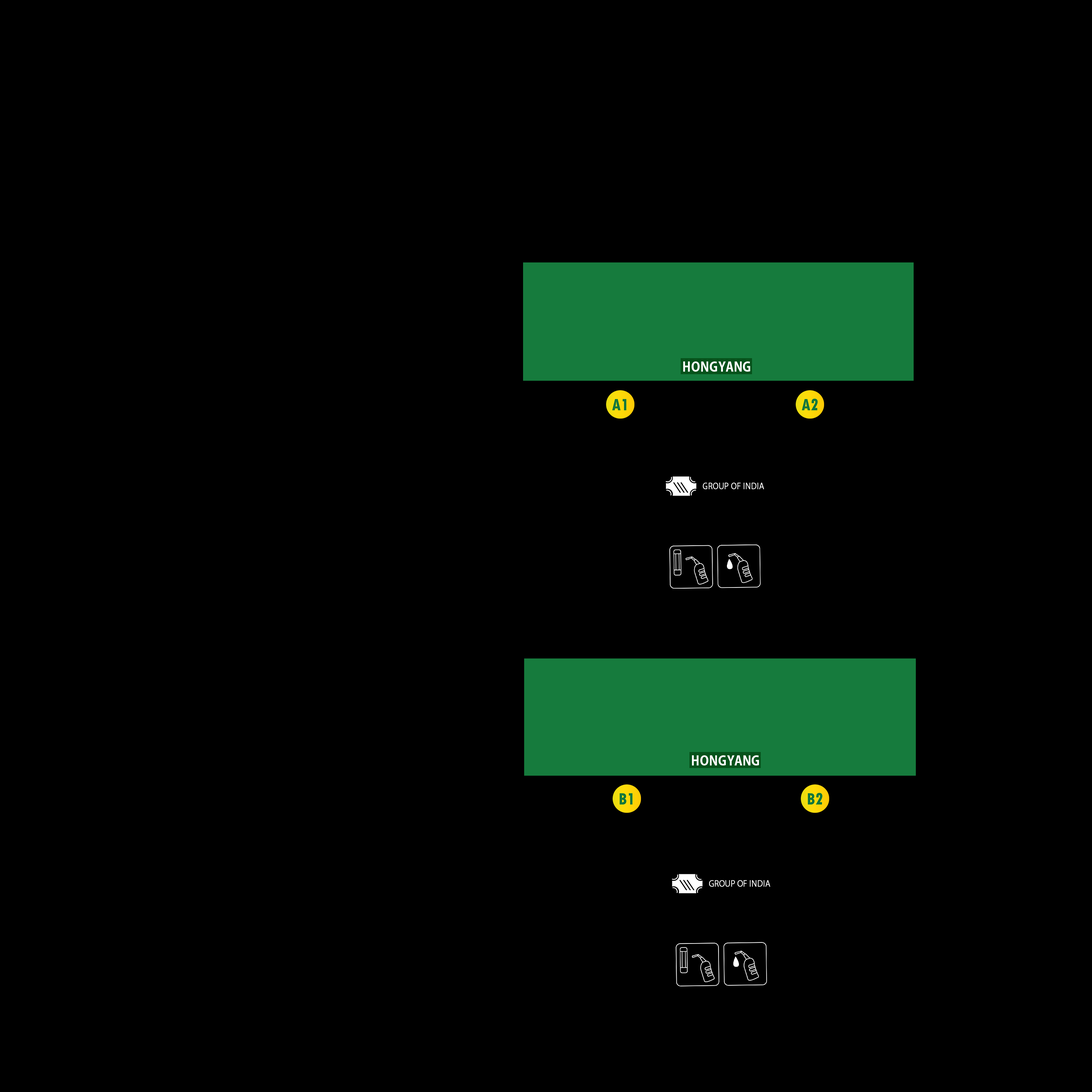
<style>
.page{position:relative;width:1092px;height:1092px;background:#000000}
.page>*{position:absolute;margin:0}
.t1{font:13.1px "KozGoPr6N-Bold";letter-spacing:0.02em;color:#ffffff;scale:0.94 1}
.t2{font:8.4px "KozGoPr6N-Regular";letter-spacing:0.02em;color:#ffffff;scale:0.94 1}
</style>
<div class="page">
<p class="t1" style="left:683px;top:361px;width:67px;height:11px">HONGYANG</p>
<p class="t2" style="left:703px;top:483px;width:61px;height:6px">GROUP OF INDIA</p>
<p class="t1" style="left:692px;top:755px;width:67px;height:10px">HONGYANG</p>
<p class="t2" style="left:709px;top:880px;width:61px;height:7px">GROUP OF INDIA</p>
</div>
